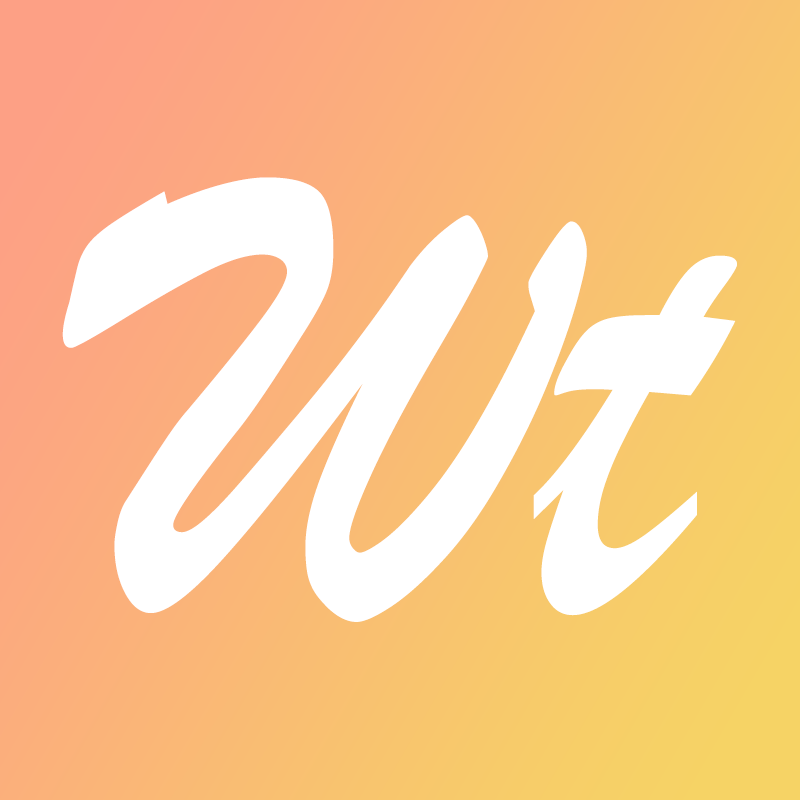
<style>
.page{position:relative;width:800px;height:800px}
.page>*{position:absolute;margin:0}
.t1{font:700px "BrushScriptMT";color:#ffffff;scale:0.91 1}
</style>
<div class="page">
<p class="t1" style="left:62px;top:177px;width:675px;height:445px">Wt</p>
</div>
